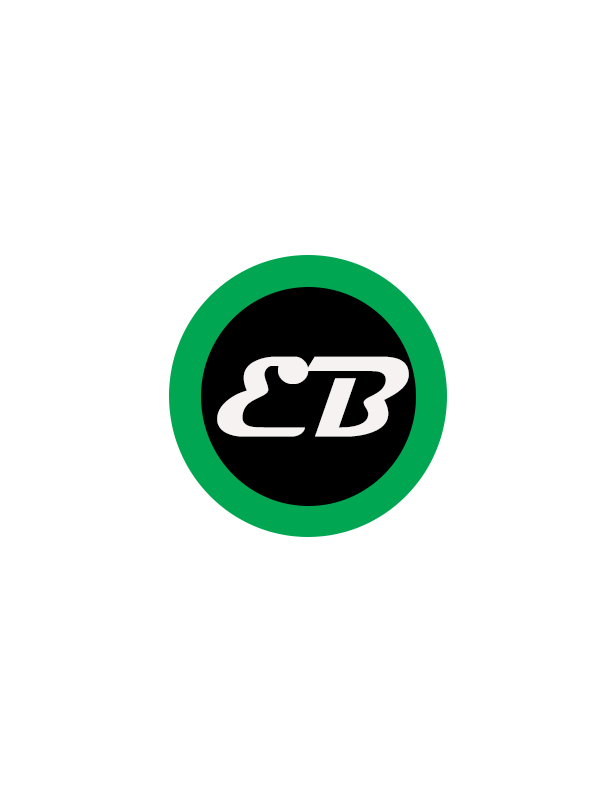
<style>
.page{position:relative;width:612px;height:792px;background:#ffffff}
.page>*{position:absolute;margin:0}
.t1{font:116.2px "Magneto-Bold";color:#f6f2f2}
</style>
<div class="page">
<p class="t1" style="left:217px;top:356px;width:192px;height:81px">EB</p>
</div>
